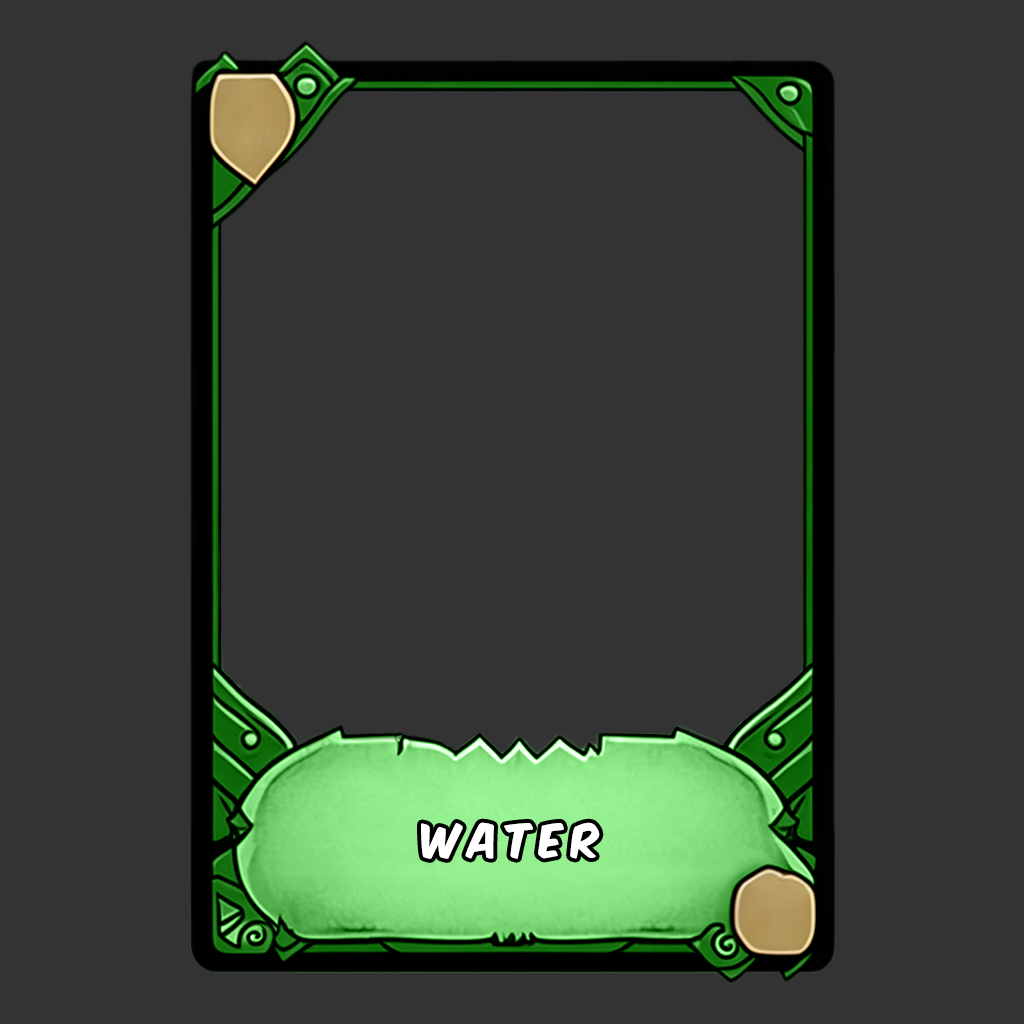
<style>
.page{position:relative;width:1024px;height:1024px;background:#333333}
.page>*{position:absolute;margin:0}
.t1{font:40px "KomikaAxis";letter-spacing:0.2em;color:#ffffff}
</style>
<div class="page">
<p class="t1" style="left:421px;top:822px;width:179px;height:37px">water</p>
</div>
